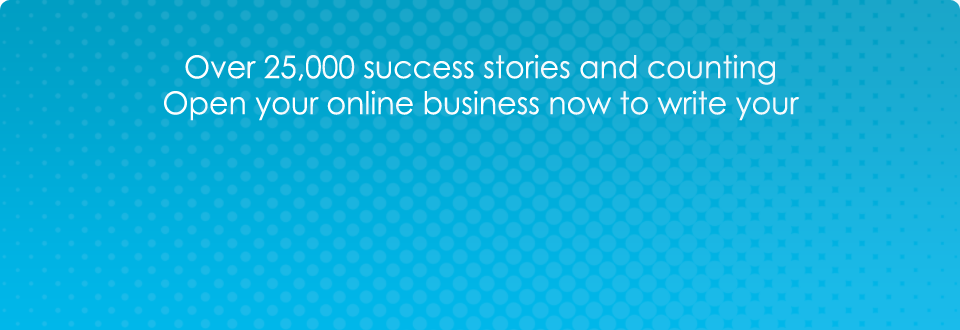
<style>
.page{position:relative;width:960px;height:330px}
.page>*{position:absolute;margin:0}
.t1{font:31.2px "CenturyGothic";color:#ffffff;scale:0.96 1}
</style>
<div class="page">
<p class="t1" style="left:164px;top:54px;width:636px;height:67px;text-align:center">Over 25,000 success stories and counting<br>Open your online business now to write your own!</p>
</div>
